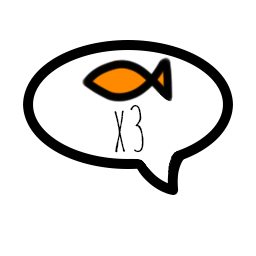
<style>
.page{position:relative;width:256px;height:256px;background:#ffffff}
.page>*{position:absolute;margin:0}
.t1{font:62.5px "AmaticSC-Regular";letter-spacing:0.005em;color:#000000}
</style>
<div class="page">
<p class="t1" style="left:114px;top:104px;width:30px;height:49px">x3</p>
</div>
